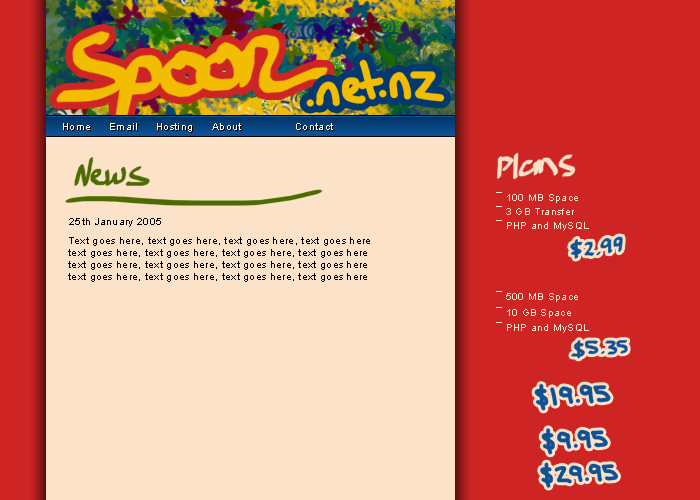
<style>
.page{position:relative;width:700px;height:500px;background:#fce2c8}
.page>*{position:absolute;margin:0}
.t1{font:10px "ArialMT";letter-spacing:0.03em;color:#ffffff}
.t2{font:10px "ArialMT";letter-spacing:0.03em;color:#000000}
.t3{font:10px "ArialMT";letter-spacing:0.03em;color:#fce2c8}
</style>
<div class="page">
<p class="t1" style="left:63px;top:123px;width:27px;height:7px">Home</p>
<p class="t2" style="left:64px;top:124px;width:27px;height:7px">Home</p>
<p class="t1" style="left:110px;top:123px;width:27px;height:7px">Email</p>
<p class="t2" style="left:111px;top:124px;width:27px;height:7px">Email</p>
<p class="t1" style="left:157px;top:123px;width:35px;height:9px">Hosting</p>
<p class="t2" style="left:158px;top:124px;width:35px;height:9px">Hosting</p>
<p class="t1" style="left:212px;top:123px;width:29px;height:7px">About</p>
<p class="t2" style="left:213px;top:124px;width:29px;height:7px">About</p>
<p class="t1" style="left:296px;top:123px;width:37px;height:7px">Contact</p>
<p class="t2" style="left:297px;top:124px;width:37px;height:7px">Contact</p>
<p class="t3" style="left:496px;top:192px;width:82px;height:11px">¯ 100 MB Space</p>
<p class="t3" style="left:496px;top:206px;width:78px;height:9px">¯ 3 GB Transfer</p>
<p class="t2" style="left:69px;top:218px;width:92px;height:9px">25th January 2005</p>
<p class="t3" style="left:496px;top:220px;width:93px;height:11px">¯ PHP and MySQL</p>
<p class="t2" style="left:68px;top:237px;width:302px;height:45px">Text goes here, text goes here, text goes here, text goes here<br>text goes here, text goes here, text goes here, text goes here<br>text goes here, text goes here, text goes here, text goes here<br>text goes here, text goes here, text goes here, text goes here</p>
<p class="t3" style="left:496px;top:291px;width:82px;height:11px">¯ 500 MB Space</p>
<p class="t3" style="left:496px;top:307px;width:75px;height:11px">¯ 10 GB Space</p>
<p class="t3" style="left:496px;top:322px;width:93px;height:11px">¯ PHP and MySQL</p>
</div>
